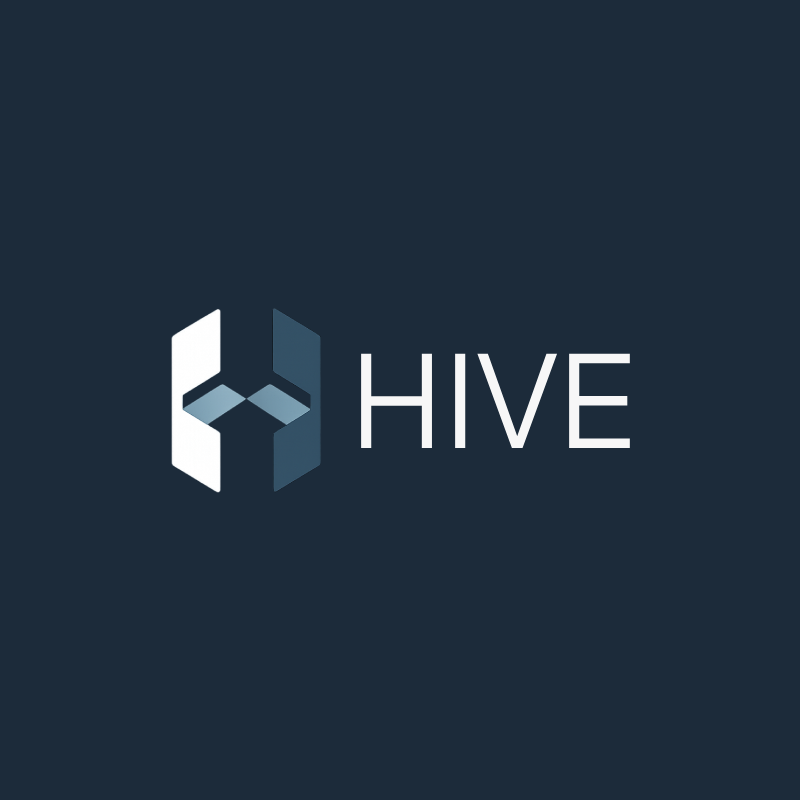
<style>
.page{position:relative;width:800px;height:800px;background:#1c2b3a}
.page>*{position:absolute;margin:0}
.t1{font:126.5px "PlusJakartaSans-Regular";color:#f7f7f7}
</style>
<div class="page">
<p class="t1" style="left:361px;top:353px;width:269px;height:95px">HIVE</p>
</div>
